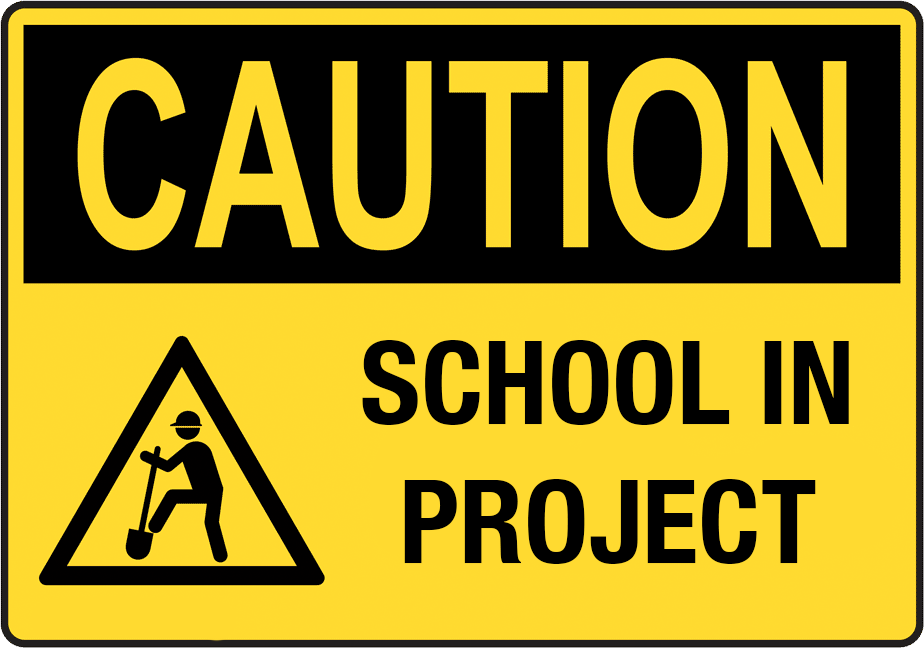
<style>
.page{position:relative;width:924px;height:648px;background:#ffda30}
.page>*{position:absolute;margin:0}
.t1{font:116.3px "HelveticaNeue-CondensedBold";color:#000000}
</style>
<div class="page">
<p class="t1" style="left:362px;top:340px;width:487px;height:224px;text-align:center">SCHOOL IN PROJECT</p>
</div>
